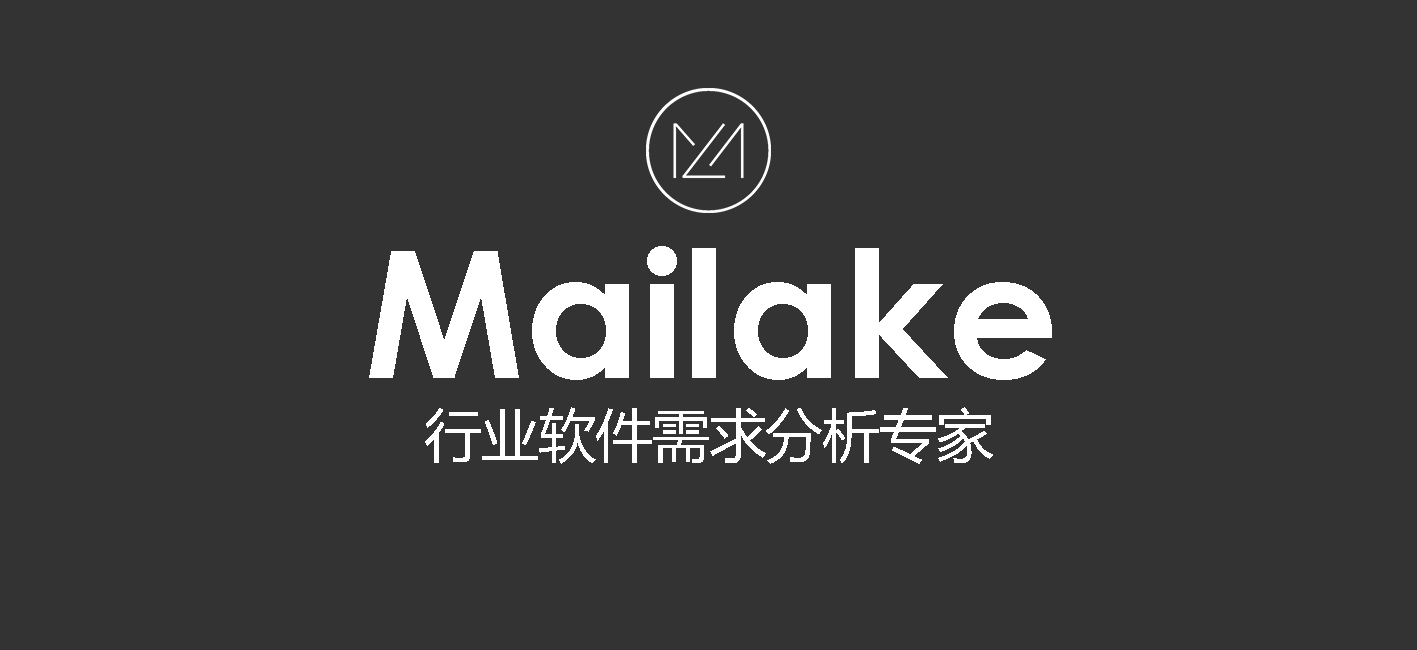
<style>
.page{position:relative;width:1417px;height:650px;background:#333333}
.page>*{position:absolute;margin:0}
.t1{font:177.3px "LevenimMT-Bold";color:#ffffff}
.t2{font:58.3px "MicrosoftYaHei";color:#ffffff}
</style>
<div class="page">
<p class="t1" style="left:369px;top:246px;width:683px;height:134px">Mailake</p>
<p class="t2" style="left:425px;top:407px;width:568px;height:57px">行业软件需求分析专家</p>
</div>
